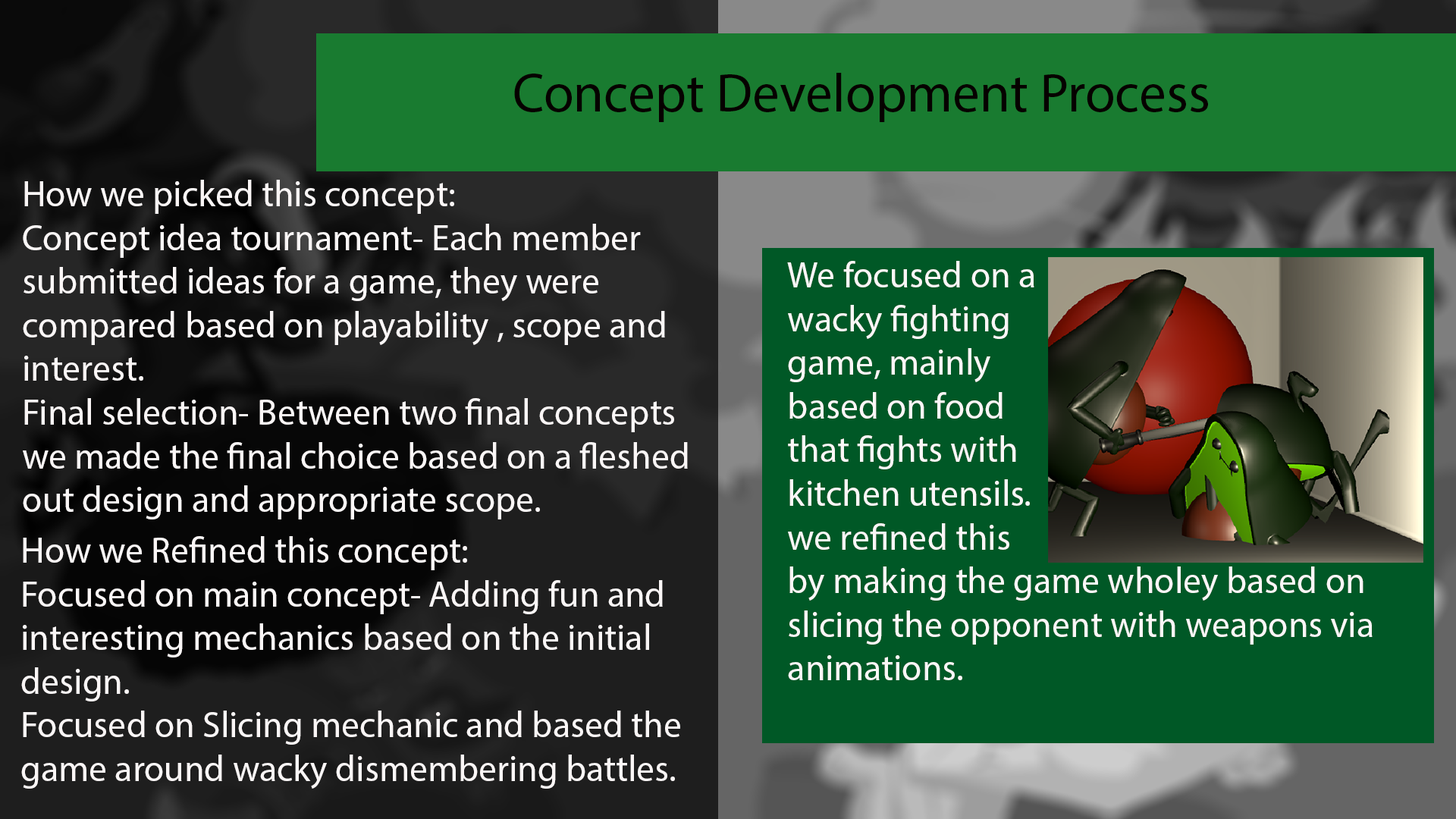
<style>
.page{position:relative;width:1456px;height:819px}
.page>*{position:absolute;margin:0}
.t1{font:54.6px "MyriadPro-Regular";color:#060000}
.t2{font:36.4px "MyriadPro-Regular";color:#faf6f6}
</style>
<div class="page">
<p class="t1" style="left:514px;top:73px;width:694px;height:49px">Concept Development Process</p>
<p class="t2" style="left:23px;top:180px;width:665px;height:339px">How we picked this concept:<br>Concept idea tournament- Each member <br>submitted ideas for a game, they were  <br>compared based on playability , scope and <br>interest.<br>Final selection- Between two final concepts<br>we made the final choice based on a fleshed <br>out design and appropriate scope.</p>
<p class="t2" style="left:787px;top:261px;width:586px;height:419px">We focused on a<br>wacky fighting <br>game, mainly<br>based on food<br>that fights with<br>kitchen utensils.<br>we refined this <br>by making the game wholey based on <br>slicing the opponent with weapons via<br>animations.</p>
<p class="t2" style="left:21px;top:536px;width:659px;height:253px">How we Refined this concept:<br>Focused on main concept- Adding fun and <br>interesting mechanics based on the initial <br>design.<br>Focused on Slicing mechanic and based the<br>game around wacky dismembering battles.</p>
</div>
